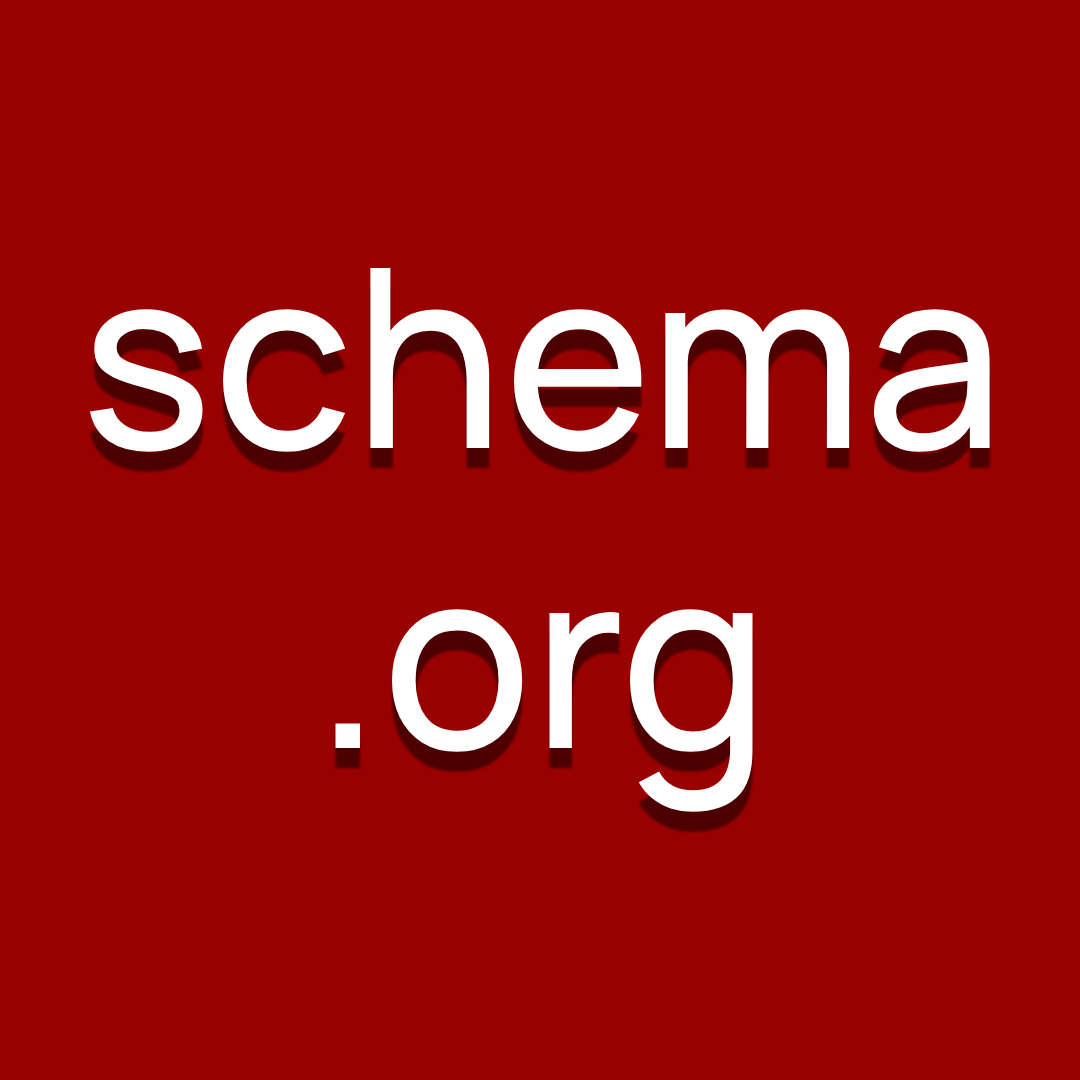
<style>
.page{position:relative;width:1080px;height:1080px;background:#990000}
.page>*{position:absolute;margin:0}
.t1{font:250px "Manrope-Regular_500.000wght";color:#ffffff}
</style>
<div class="page">
<p class="t1" style="left:90px;top:268px;width:900px;height:544px;text-align:center">schema<br>.org</p>
</div>
